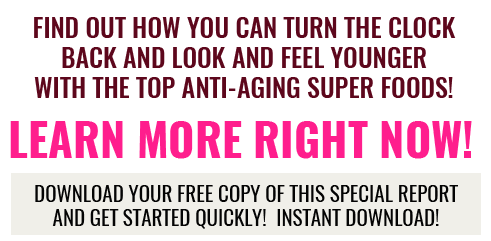
<style>
.page{position:relative;width:491px;height:241px;background:#ffffff}
.page>*{position:absolute;margin:0}
.t1{font:26px/30px "Oswald-Medium";color:#5d071c;text-transform:uppercase}
.t2{font:45px "Oswald-Bold";color:#ff1e8d}
.t3{font:21px/24px "Oswald-Regular";color:#040404}
</style>
<div class="page">
<p class="t1" style="left:34px;top:17px;width:422px;height:81px;text-align:center">FIND OUT HOW YOU CAN TURN THE CLOCK<br>BACK AND LOOK AND FEEL YOUNGER <br>WITH THE TOP ANTI-AGING SUPER FOODS!</p>
<p class="t2" style="left:10px;top:121px;width:462px;height:38px">LEARN MORE RIGHT NOW!</p>
<p class="t3" style="left:35px;top:185px;width:423px;height:44px;text-align:center">DOWNLOAD YOUR FREE COPY OF THIS SPECIAL REPORT<br>AND GET STARTED QUICKLY!  INSTANT DOWNLOAD!</p>
</div>
